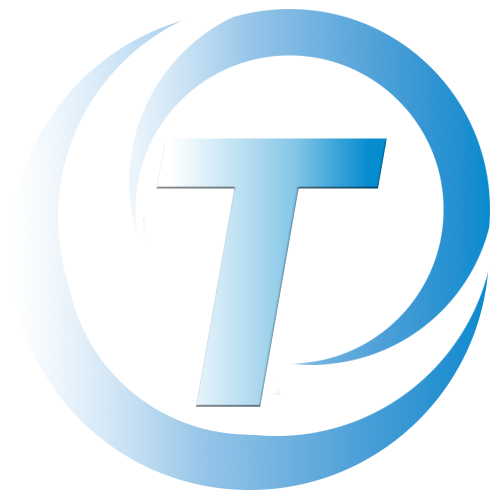
<style>
.page{position:relative;width:500px;height:500px;background:#ffffff}
.page>*{position:absolute;margin:0}
.t1{font:377px "Roboto-BlackItalic"}
</style>
<div class="page">
<p class="t1" style="left:156px;top:138px;width:231px;height:269px">T</p>
</div>
